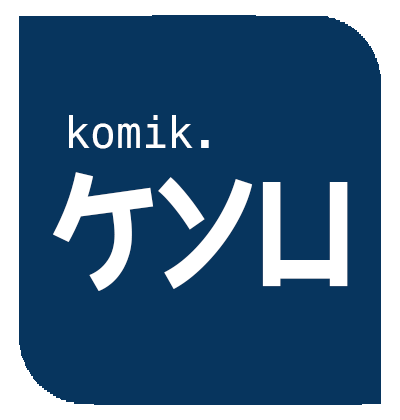
<style>
.page{position:relative;width:400px;height:420px;background:#07355e}
.page>*{position:absolute;margin:0}
.t1{font:43px "MesloLGS-NF-Regular";color:#ffffff}
.t2{font:156px "Electroharmonix-Regular";color:#ffffff}
</style>
<div class="page">
<p class="t1" style="left:69px;top:115px;width:140px;height:34px">komik.</p>
<p class="t2" style="left:53px;top:172px;width:295px;height:119px">KYU</p>
</div>
